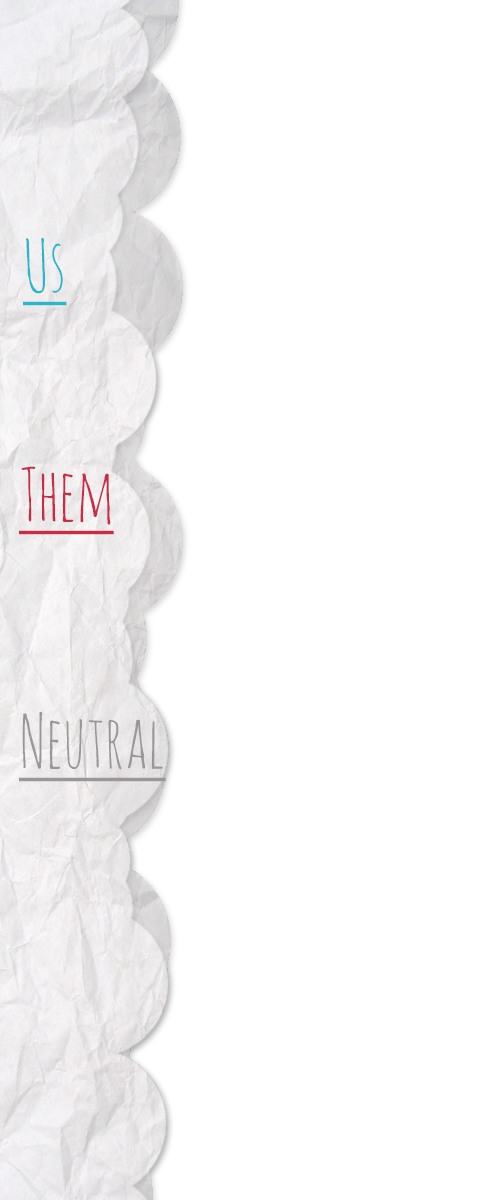
<style>
.page{position:relative;width:500px;height:1200px;background:#ffffff}
.page>*{position:absolute;margin:0}
.t1{font:72px "AmaticSC-Regular";color:#2ab7ca;text-decoration:underline}
.t2{font:72px "AmaticSC-Regular";color:#cb2c45;text-decoration:underline}
.t3{font:72px "AmaticSC-Regular";color:#999798;text-decoration:underline}
</style>
<div class="page">
<p class="t1" style="left:23px;top:237px;width:44px;height:69px">Us</p>
<p class="t2" style="left:19px;top:466px;width:95px;height:69px">Them</p>
<p class="t3" style="left:19px;top:712px;width:147px;height:70px">Neutral</p>
</div>
